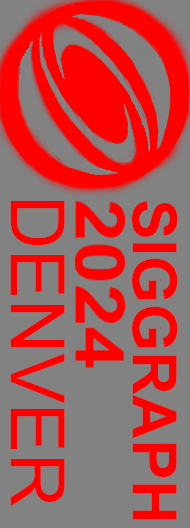
<style>
.page{position:relative;width:190px;height:528px;background:#828282}
.page>*{position:absolute;margin:0}
.t1{font:75px "ArialMT";color:#ff0000}
.t2{font:61px "Arial-BoldMT";color:#ff0000}
</style>
<div class="page">
<p class="t1" style="left:10px;top:201px;width:55px;height:305px;rotate:90deg">DENVER</p>
<p class="t2" style="left:132px;top:201px;width:46px;height:319px;rotate:90deg">SIGGRAPH</p>
</div>
